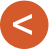
<style>
.page{position:relative;width:49px;height:49px;background:#d55a2b}
.page>*{position:absolute;margin:0}
.t1{font:39.6px "MyriadPro-Bold";color:#ffffff}
</style>
<div class="page">
<p class="t1" style="left:13px;top:14px;width:19px;height:21px;rotate:180deg">&gt;</p>
</div>
